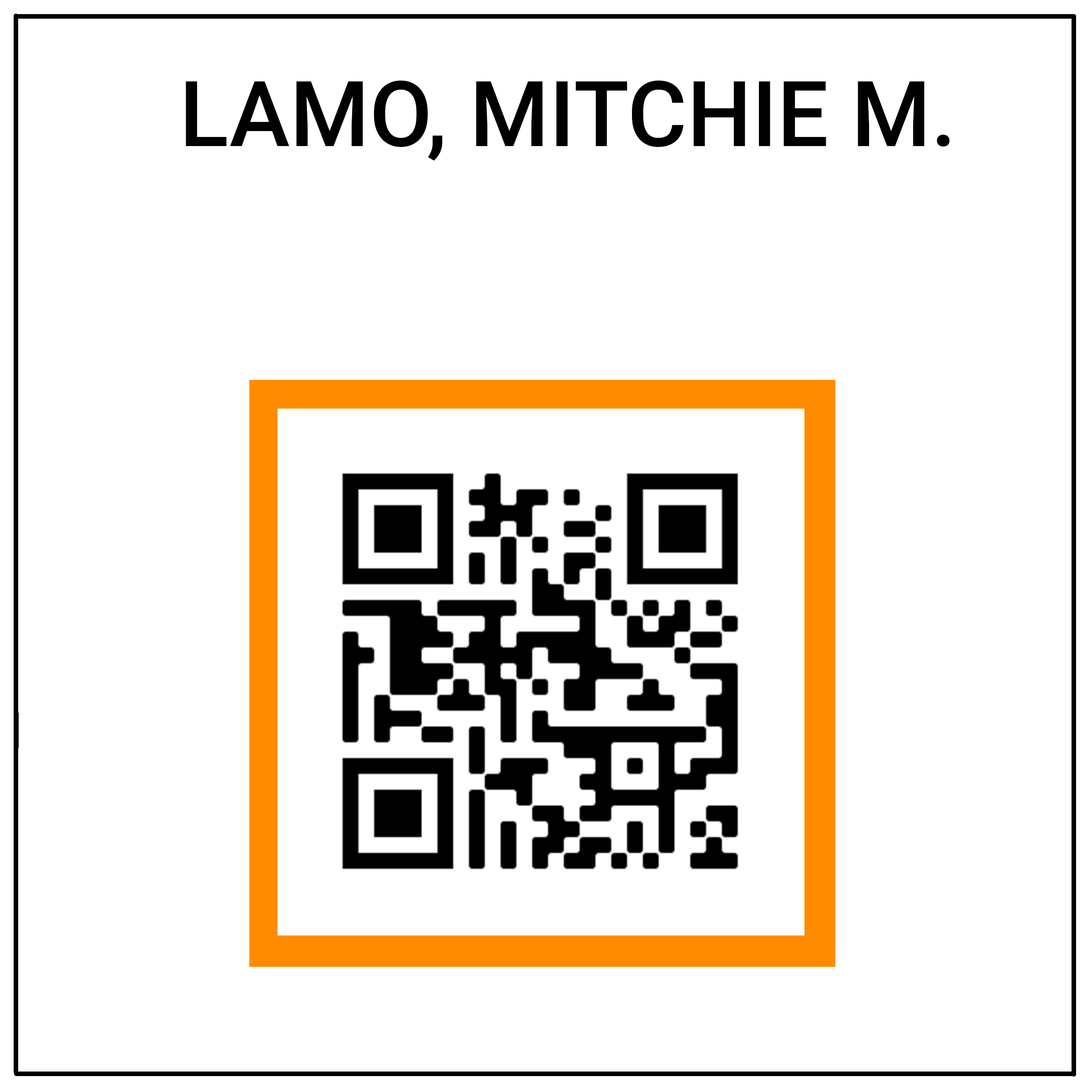
<style>
.page{position:relative;width:1092px;height:1092px;background:#ffffff}
.page>*{position:absolute;margin:0}
.t1{font:91px "Roboto-Medium";color:#000000}
</style>
<div class="page">
<p class="t1" style="left:186px;top:80px;width:764px;height:81px">LAMO, MITCHIE M.</p>
</div>
